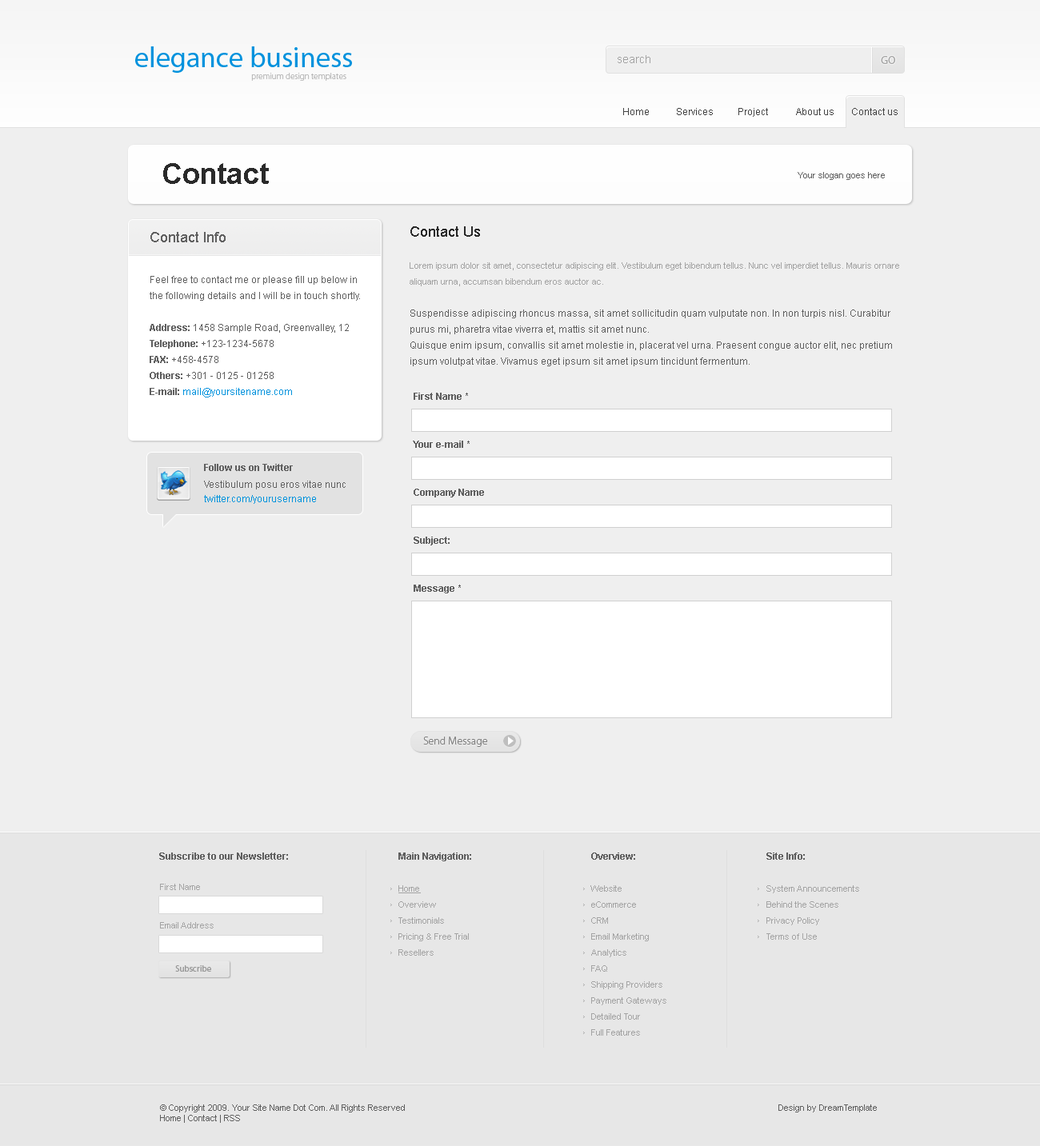
<style>
.page{position:relative;width:1040px;height:1146px;background:#efefef}
.page>*{position:absolute;margin:0}
.t1{font:28.8px "MyriadPro-Regular";color:#0092dd}
.t2{font:11.2px "ArialMT";color:#a2a2a2}
.t3{font:11.2px "MyriadPro-Regular";color:#a2a2a2}
.t4{font:8.8px "MyriadPro-Light";color:#b5b5b5}
.t5{font:9.6px "ArialMT";color:#434343}
.t6{font:28.8px "Arial-BoldMT";color:#2a2a2a}
.t7{font:8.8px "ArialMT";color:#5f5f5f}
.t8{font:14.4px "ArialMT";color:#616161}
.t9{font:9.6px/16px "ArialMT";color:#5f5f5f}
.t10{font:14.4px/16px "ArialMT";color:#2a2a2a}
.t11{font:8.8px/16px "ArialMT";color:#a4a4a4}
.t12{font:9.6px/16px "Arial-BoldMT";color:#5f5f5f}
.t13{font:9.6px/16px "ArialMT";color:#0092dd}
.t14{font:9.6px/24px "Arial-BoldMT";color:#5f5f5f}
.t15{font:9.6px "Arial-BoldMT";color:#5f5f5f}
.t16{font:9.6px/14.4px "ArialMT";color:#616161}
.t17{font:9.6px/14.4px "ArialMT";color:#0092dd}
.t18{font:11.2px "MyriadPro-Light";color:#7f7f7f}
.t19{font:8.8px/16px "ArialMT";color:#a4a4a4;text-decoration:underline}
.t20{font:8.8px/19.2px "ArialMT";color:#a4a4a4}
.t21{font:8.8px "MyriadPro-Regular";color:#999999}
</style>
<div class="page">
<p class="t1" style="left:135px;top:46px;width:217px;height:27px">elegance business</p>
<p class="t2" style="left:618px;top:55px;width:32px;height:8px">search</p>
<p class="t3" style="left:881px;top:56px;width:14px;height:8px">GO</p>
<p class="t4" style="left:251px;top:73px;width:95px;height:8px">premium design templates</p>
<p class="t5" style="left:623px;top:108px;width:275px;height:9px">Home           Services          Project            About us       Contact us</p>
<p class="t6" style="left:163px;top:163px;width:106px;height:21px">Contact</p>
<p class="t7" style="left:798px;top:172px;width:87px;height:8px">Your slogan goes here</p>
<p class="t8" style="left:150px;top:232px;width:76px;height:10px">Contact Info</p>
<p class="t9" style="left:410px;top:226px;width:489px;height:140px"><span class="t10">Contact Us<br><br></span><span class="t11">Lorem ipsum dolor sit amet, consectetur adipiscing elit. Vestibulum eget bibendum tellus. Nunc vel imperdiet tellus. Mauris ornare aliquam urna, accumsan bibendum eros auctor ac.<br><br></span>Suspendisse adipiscing rhoncus massa, sit amet sollicitudin quam vulputate non. In non turpis nisl. Curabitur purus mi, pharetra vitae viverra et, mattis sit amet nunc. <br>Quisque enim ipsum, convallis sit amet molestie in, placerat vel urna. Praesent congue auctor elit, nec pretium ipsum volutpat vitae. Vivamus eget ipsum sit amet ipsum tincidunt fermentum.<br><br>Sed hendrerit neque ac erat condimentum vulputate. Nulla velit massa, dictum et interdum quis, tempus at velit. Nunc gravida luctus mauris at rhoncus. Nulla facilisi. Phasellus iaculis varius nibh a adipiscing. Vestibulum nec laoreet tellus. Integer aliquet lacinia justo vel congue.</p>
<p class="t9" style="left:150px;top:276px;width:210px;height:122px">Feel free to contact me or please fill up below in the following details and I will be in touch shortly.<br><br><span class="t12">Address:</span> 1458 Sample Road, Greenvalley, 12<br><span class="t12">Telephone:</span> +123-1234-5678<br><span class="t12">FAX:</span> +458-4578<br><span class="t12">Others:</span> +301 - 0125 - 01258<br><span class="t12">E-mail: </span><span class="t13">mail@yoursitename.com</span></p>
<p class="t14" style="left:413px;top:393px;width:71px;height:201px">First Name *<br><br>Your e-mail *<br><br>Company Name<br><br>Subject:<br><br>Message *</p>
<p class="t15" style="left:204px;top:464px;width:89px;height:7px">Follow us on Twitter</p>
<p class="t16" style="left:204px;top:481px;width:142px;height:23px">Vestibulum posu eros vitae nunc <span class="t17">twitter.com/yourusername</span></p>
<p class="t18" style="left:423px;top:737px;width:65px;height:10px">Send Message</p>
<p class="t15" style="left:159px;top:853px;width:129px;height:7px">Subscribe to our Newsletter:</p>
<p class="t11" style="left:398px;top:853px;width:73px;height:103px"><span class="t12">Main Navigation:<br><br></span><span class="t19">Home<br></span>Overview<br>Testimonials<br>Pricing &amp; Free Trial<br>Resellers</p>
<p class="t11" style="left:590px;top:853px;width:76px;height:183px"><span class="t12">Overview:<br><br></span>Website<br>eCommerce<br>CRM<br>Email Marketing<br>Analytics<br>FAQ<br>Shipping Providers<br>Payment Gateways<br>Detailed Tour<br>Full Features</p>
<p class="t11" style="left:766px;top:853px;width:93px;height:87px"><span class="t12">Site Info:<br><br></span>System Announcements<br>Behind the Scenes<br>Privacy Policy<br>Terms of Use</p>
<p class="t20" style="left:160px;top:884px;width:54px;height:45px">First Name<br><br>Email Address</p>
<p class="t21" style="left:175px;top:966px;width:36px;height:6px">Subscribe</p>
<p class="t7" style="left:160px;top:1105px;width:245px;height:18px">© Copyright 2009. Your Site Name Dot Com. All Rights Reserved<br>Home | Contact | RSS</p>
<p class="t7" style="left:778px;top:1105px;width:99px;height:8px">Design by DreamTemplate</p>
</div>
